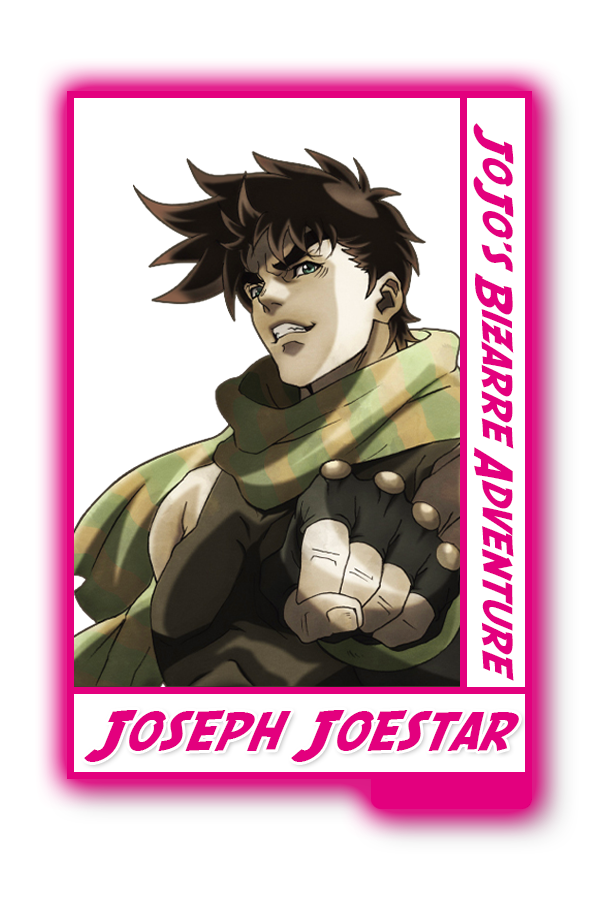
<style>
.page{position:relative;width:600px;height:900px;background:#ffffff}
.page>*{position:absolute;margin:0}
.t1{font:42.4px "SFFedora";color:#e3007e}
.t2{font:55.4px "SFFedora";color:#e3007e}
</style>
<div class="page">
<p class="t1" style="left:473px;top:123px;width:41px;height:558px;rotate:90deg">JoJo's Bizarre Adventure</p>
<p class="t2" style="left:84px;top:710px;width:435px;height:52px">Joseph Joestar</p>
</div>
